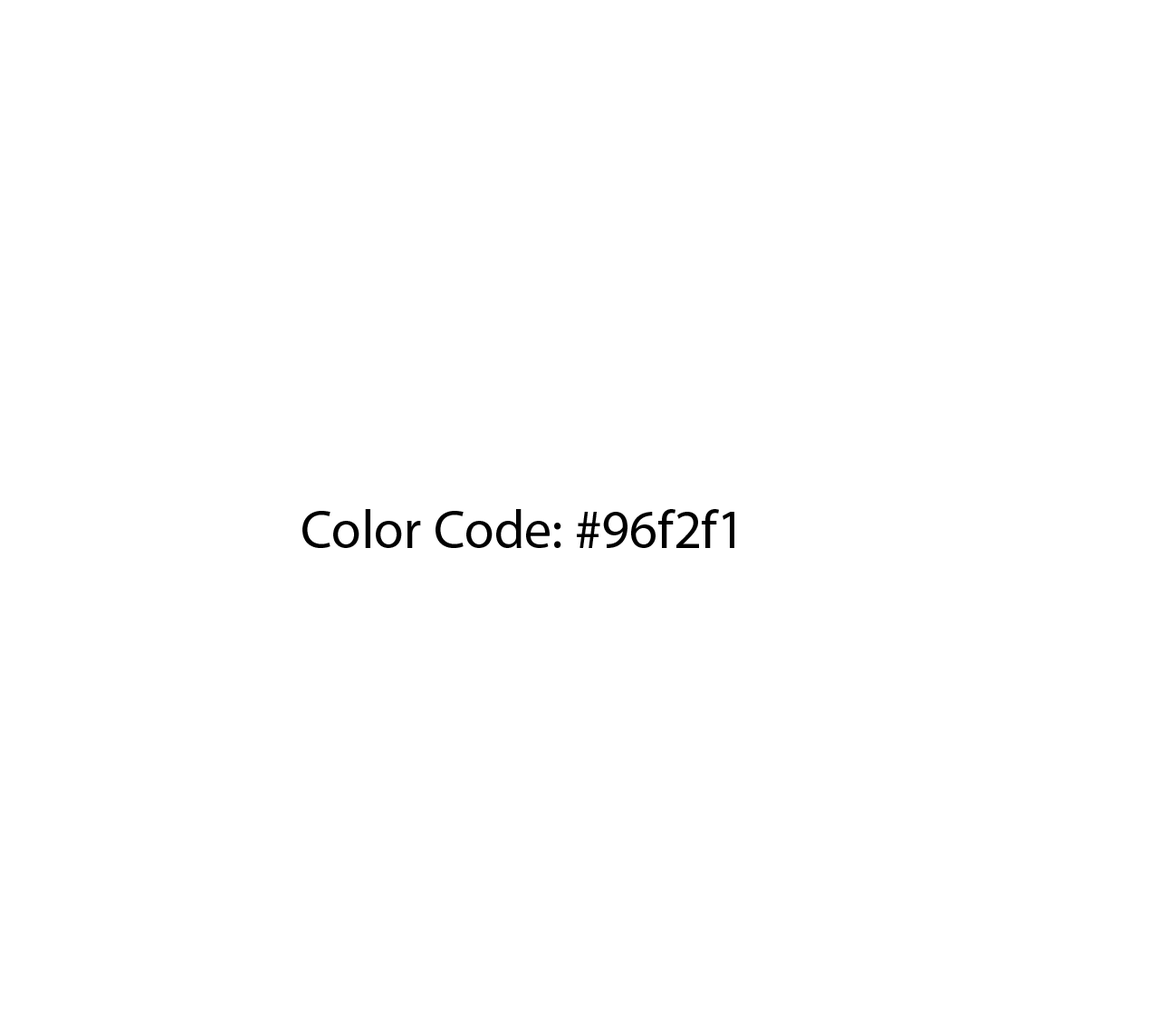
<style>
.page{position:relative;width:1159px;height:1029px;background:#ffffff}
.page>*{position:absolute;margin:0}
.t1{font:54.3px "MyriadPro-Regular";color:#000000}
</style>
<div class="page">
<p class="t1" style="left:302px;top:509px;width:432px;height:39px">Color Code: #96f2f1</p>
</div>
